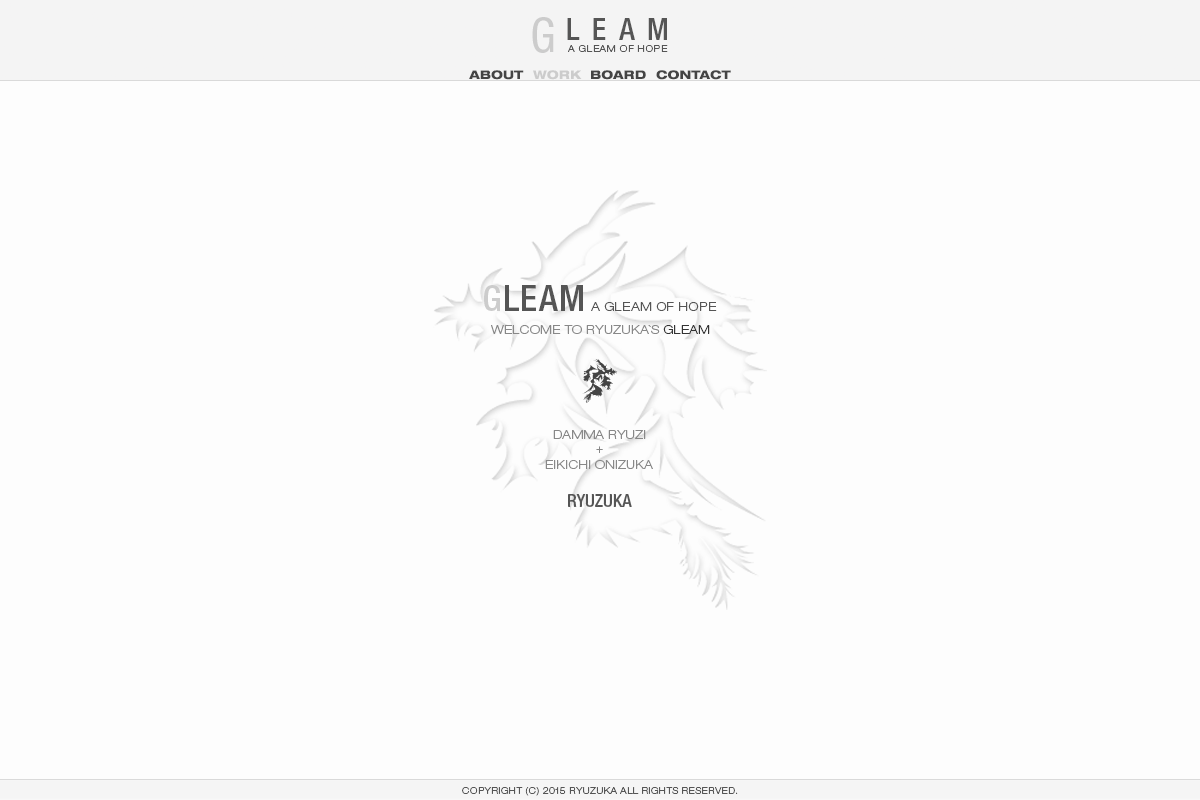
<style>
.page{position:relative;width:1200px;height:800px;background:#fdfdfd}
.page>*{position:absolute;margin:0}
.t1{font:48px "HelveticaNeueLTStd-Cn";letter-spacing:0.04em;color:#cccccc}
.t2{font:30px "HelveticaNeueLTStd-MdCn";letter-spacing:0.42em;color:#555555}
.t3{font:9px "HelveticaNeueLTStd-LtEx";letter-spacing:0.08em;color:#555555}
.t4{font:12px "HelveticaNeueLTStd-HvEx";color:#444444}
.t5{font:12px "HelveticaNeueLTStd-HvEx";color:#cccccc}
.t6{font:12px "HelveticaNeueLTStd-LtEx";letter-spacing:0.04em;color:#555555}
.t7{font:36px "HelveticaNeueLTStd-MdCn";letter-spacing:0.04em;color:#cccccc}
.t8{font:36px "HelveticaNeueLTStd-MdCn";letter-spacing:0.04em;color:#555555}
.t9{font:12px "HelveticaNeueLTStd-LtEx";letter-spacing:0.02em;color:#888888}
.t10{font:12px "HelveticaNeueLTStd-LtEx";letter-spacing:0.02em;color:#333333}
.t11{font:12px "HelveticaNeueLTStd-LtEx";color:#888888}
.t12{font:18px "HelveticaNeueLTStd-MdCn";color:#555555}
.t13{font:9px "HelveticaNeueLTStd-LtEx";letter-spacing:0.04em;color:#555555}
</style>
<div class="page">
<p class="t1" style="left:532px;top:17px;width:22px;height:36px">G</p>
<p class="t2" style="left:567px;top:18px;width:100px;height:22px">LEAM</p>
<p class="t3" style="left:568px;top:45px;width:100px;height:7px">A GLEAM OF HOPE</p>
<p class="t4" style="left:469px;top:70px;width:55px;height:10px">ABOUT</p>
<p class="t5" style="left:533px;top:70px;width:49px;height:10px">WORK</p>
<p class="t4" style="left:591px;top:70px;width:55px;height:10px">BOARD</p>
<p class="t4" style="left:656px;top:70px;width:75px;height:10px">CONTACT</p>
<p class="t6" style="left:484px;top:285px;width:233px;height:26px"><span class="t7">G</span><span class="t8">LEAM </span>A GLEAM OF HOPE</p>
<p class="t9" style="left:491px;top:325px;width:219px;height:9px">WELCOME TO RYUZUKA`S <span class="t10">GLEAM</span></p>
<p class="t9" style="left:553px;top:430px;width:93px;height:9px">DAMMA RYUZI</p>
<p class="t11" style="left:596px;top:446px;width:7px;height:7px">+</p>
<p class="t9" style="left:545px;top:460px;width:108px;height:9px">EIKICHI ONIZUKA</p>
<p class="t12" style="left:568px;top:494px;width:64px;height:13px">RYUZUKA</p>
<p class="t13" style="left:462px;top:787px;width:276px;height:9px">COPYRIGHT (C) 2015 RYUZUKA ALL RIGHTS RESERVED.</p>
</div>
